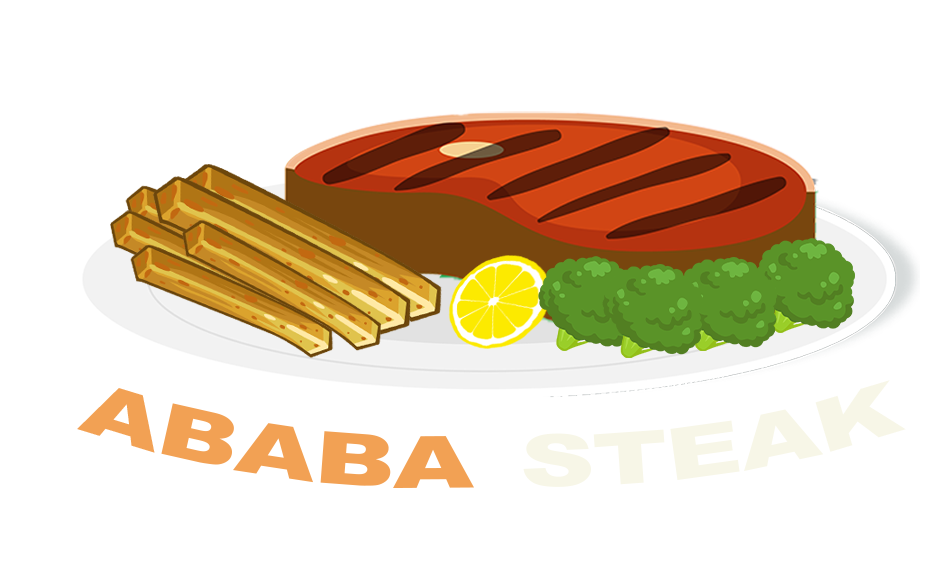
<style>
.page{position:relative;width:947px;height:561px;background:#ffffff}
.page>*{position:absolute;margin:0}
.t1{font:72px "Arial-Black";color:#f2a154;scale:1.44 1}
.t2{font:72px "Arial-Black";color:#f7f6e7;scale:1.44 1}
</style>
<div class="page">
<p class="t1" style="left:77px;top:388px;width:397px;height:100px;rotate:11deg">ABABA</p>
<p class="t2" style="left:523px;top:380px;width:383px;height:107px;rotate:-6deg">STEAK</p>
</div>
